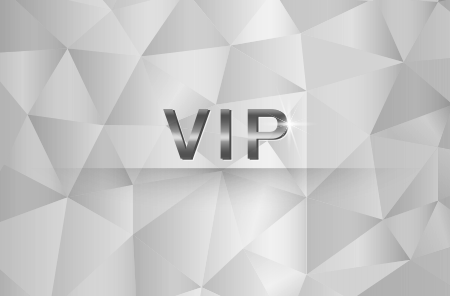
<style>
.page{position:relative;width:450px;height:296px}
.page>*{position:absolute;margin:0}
.t1{font:68.1px "ARVFJXHeiB5WrW-EB";letter-spacing:0.1em}
</style>
<div class="page">
<p class="t1" style="left:163px;top:109px;width:124px;height:50px">VIP</p>
</div>
